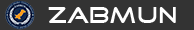
<style>
.page{position:relative;width:194px;height:30px;background:#333333}
.page>*{position:absolute;margin:0}
.t1{font:22.2px "GoodTimes";color:#ffffff}
</style>
<div class="page">
<p class="t1" style="left:48px;top:7px;width:128px;height:16px">ZABMUN</p>
</div>
